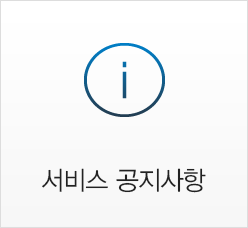
<style>
.page{position:relative;width:248px;height:228px}
.page>*{position:absolute;margin:0}
.t1{font:26px "YDVYGO32";letter-spacing:-0.025em;color:#222222;scale:0.96 1}
</style>
<div class="page">
<p class="t1" style="left:42px;top:168px;width:164px;height:25px">서비스 공지사항</p>
</div>
